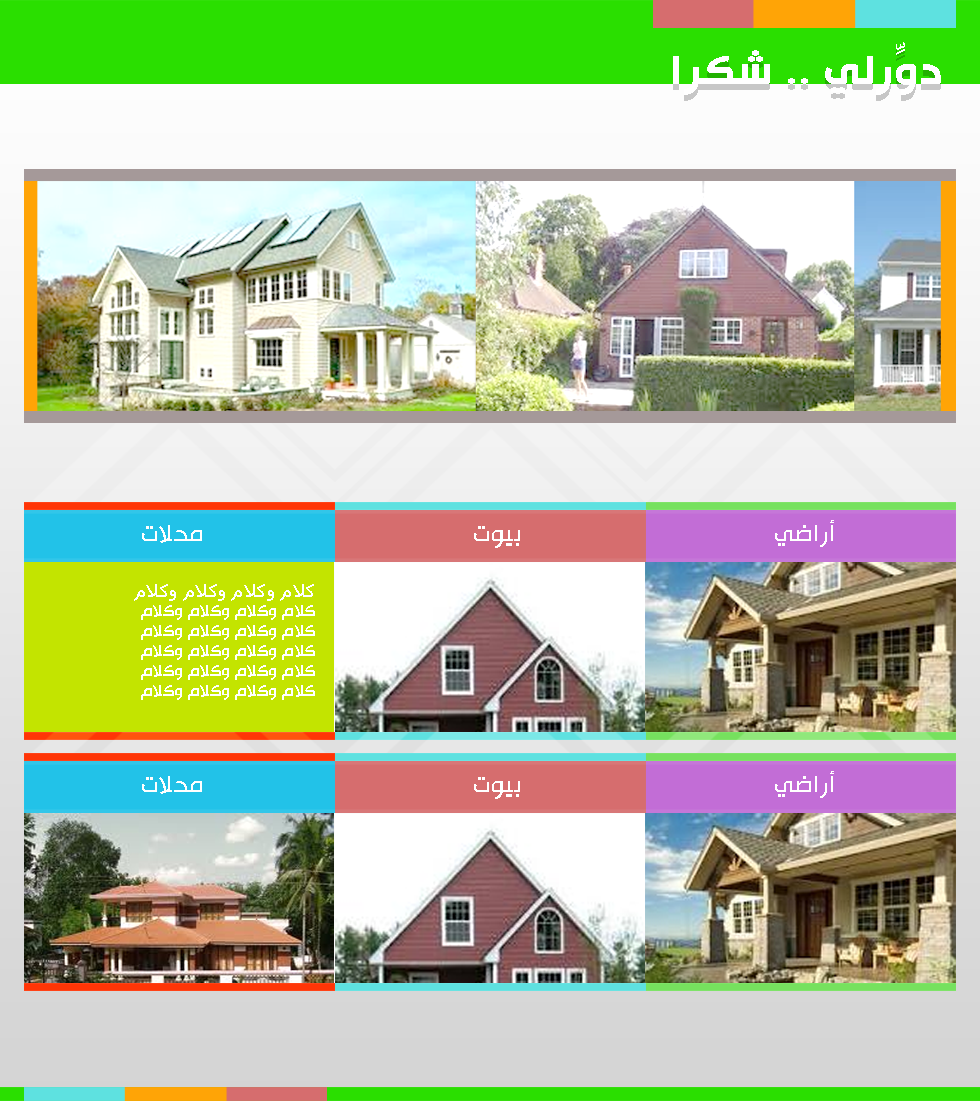
<style>
.page{position:relative;width:980px;height:1101px}
.page>*{position:absolute;margin:0}
.t1{font:46.9px "HacenTunisiaBold";letter-spacing:0.019em;color:#ffffff;scale:1.1 1}
.t2{font:26.6px "HacenTunisiaLt";letter-spacing:0.02em;color:#ffffff;scale:1.05 1}
.t3{font:17.9px/10px "HacenTunisiaLt";letter-spacing:0.02em;color:#ffffff;scale:1.05 1}
.t4{font:17.9px/17.4px "Tahoma";letter-spacing:0.02em;color:#ffffff;scale:1.05 1}
</style>
<div class="page">
<p class="t1" style="left:673px;top:42px;width:268px;height:53px">دوِّرلي .. شكرا</p>
<p class="t2" style="left:775px;top:520px;width:59px;height:27px">أراضي</p>
<p class="t2" style="left:142px;top:525px;width:60px;height:18px">محلات</p>
<p class="t2" style="left:474px;top:526px;width:46px;height:22px">بيوت</p>
<p class="t3" style="left:134px;top:584px;width:181px;height:116px"><span class="t4">كلام وكلام وكلام وكلام <br><br></span>كلام وكلام وكلام وكلام<br><br>كلام وكلام وكلام وكلام<br><br>كلام وكلام وكلام وكلام<br><br>كلام وكلام وكلام وكلام<br><br>كلام وكلام وكلام وكلام</p>
<p class="t2" style="left:775px;top:771px;width:59px;height:27px">أراضي</p>
<p class="t2" style="left:142px;top:776px;width:60px;height:18px">محلات</p>
<p class="t2" style="left:474px;top:777px;width:46px;height:22px">بيوت</p>
</div>
